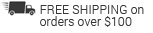
<style>
.page{position:relative;width:153px;height:33px;background:#ffffff}
.page>*{position:absolute;margin:0}
.t1{font:21.2px/12px "Roboto-Light";color:#393939}
</style>
<div class="page">
<p class="t1" style="left:40px;top:5px;width:104px;height:22px">FREE SHIPPING on<br>orders over $100</p>
</div>
